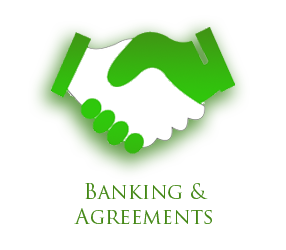
<style>
.page{position:relative;width:286px;height:250px;background:#ffffff}
.page>*{position:absolute;margin:0}
.t1{font:20.8px "TrajanPro-Regular";color:#448816}
</style>
<div class="page">
<p class="t1" style="left:74px;top:183px;width:138px;height:41px;text-align:center">Banking &amp; <br>Agreements</p>
</div>
